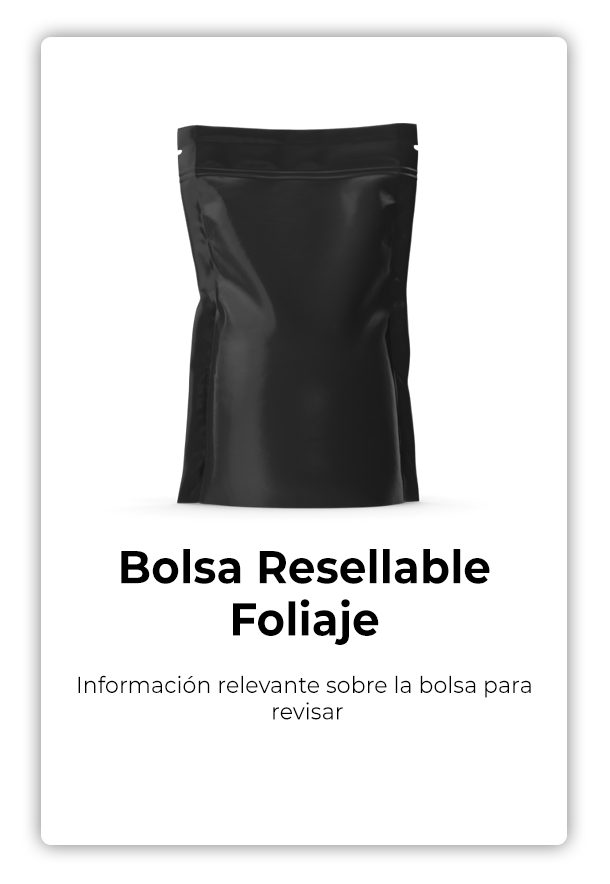
<style>
.page{position:relative;width:610px;height:884px;background:#ffffff}
.page>*{position:absolute;margin:0}
.t1{font:46.1px "Montserrat-Bold";letter-spacing:0.004em;color:#000000;scale:0.94 1}
.t2{font:23.3px "Montserrat-Regular";letter-spacing:0.004em;color:#000000;scale:0.94 1}
</style>
<div class="page">
<p class="t1" style="left:121px;top:549px;width:369px;height:96px;text-align:center">Bolsa Resellable<br>Foliaje</p>
<p class="t2" style="left:78px;top:675px;width:453px;height:45px;text-align:center">Información relevante sobre la bolsa para <br>revisar</p>
</div>
